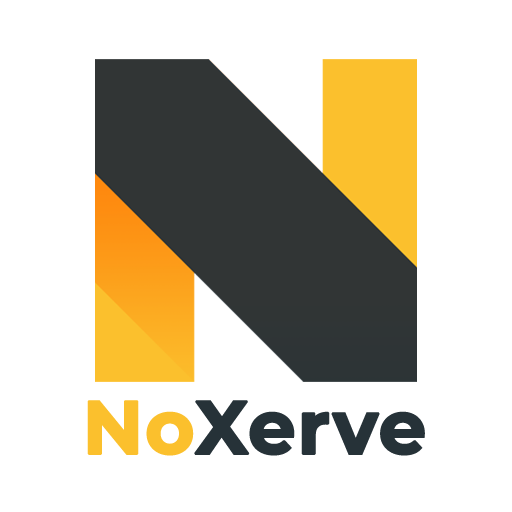
<style>
.page{position:relative;width:512px;height:512px;background:#ffffff}
.page>*{position:absolute;margin:0}
.t1{font:75px "Montserrat-Bold";color:#263238;font-weight:bold}
.t2{font:75px "Montserrat-Bold";color:#fbc02d;font-weight:bold}
</style>
<div class="page">
<p class="t1" style="left:87px;top:400px;width:338px;height:56px"><span class="t2">No</span>Xerve</p>
</div>
